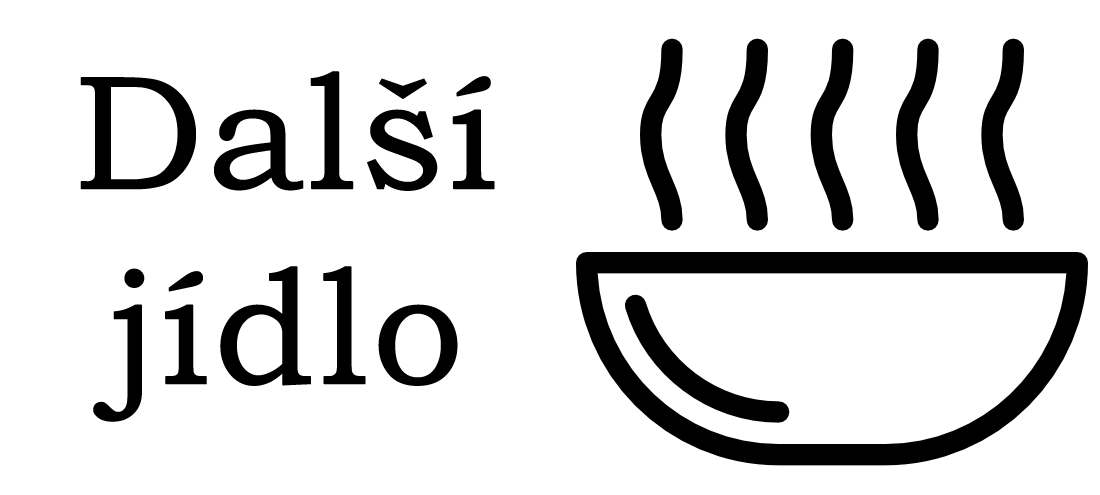
<style>
.page{position:relative;width:1100px;height:495px;background:#ffffff}
.page>*{position:absolute;margin:0}
.t1{font:162.5px "BookmanOldStyle";color:#000000;font-weight:bold}
</style>
<div class="page">
<p class="t1" style="left:80px;top:71px;width:415px;height:351px;text-align:center">Další jídlo</p>
</div>
